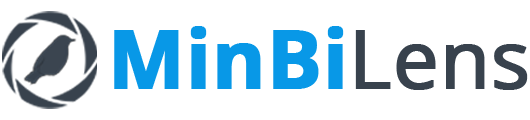
<style>
.page{position:relative;width:530px;height:120px;background:#ffffff}
.page>*{position:absolute;margin:0}
.t1{font:81.3px "OpenSans-Bold";letter-spacing:-0.01em;color:#0898e7;font-weight:bold}
.t2{font:81.3px "OpenSans";letter-spacing:-0.01em;color:#38424d;font-weight:bold}
</style>
<div class="page">
<p class="t1" style="left:114px;top:26px;width:414px;height:64px">MinBi<span class="t2">Lens</span></p>
</div>
